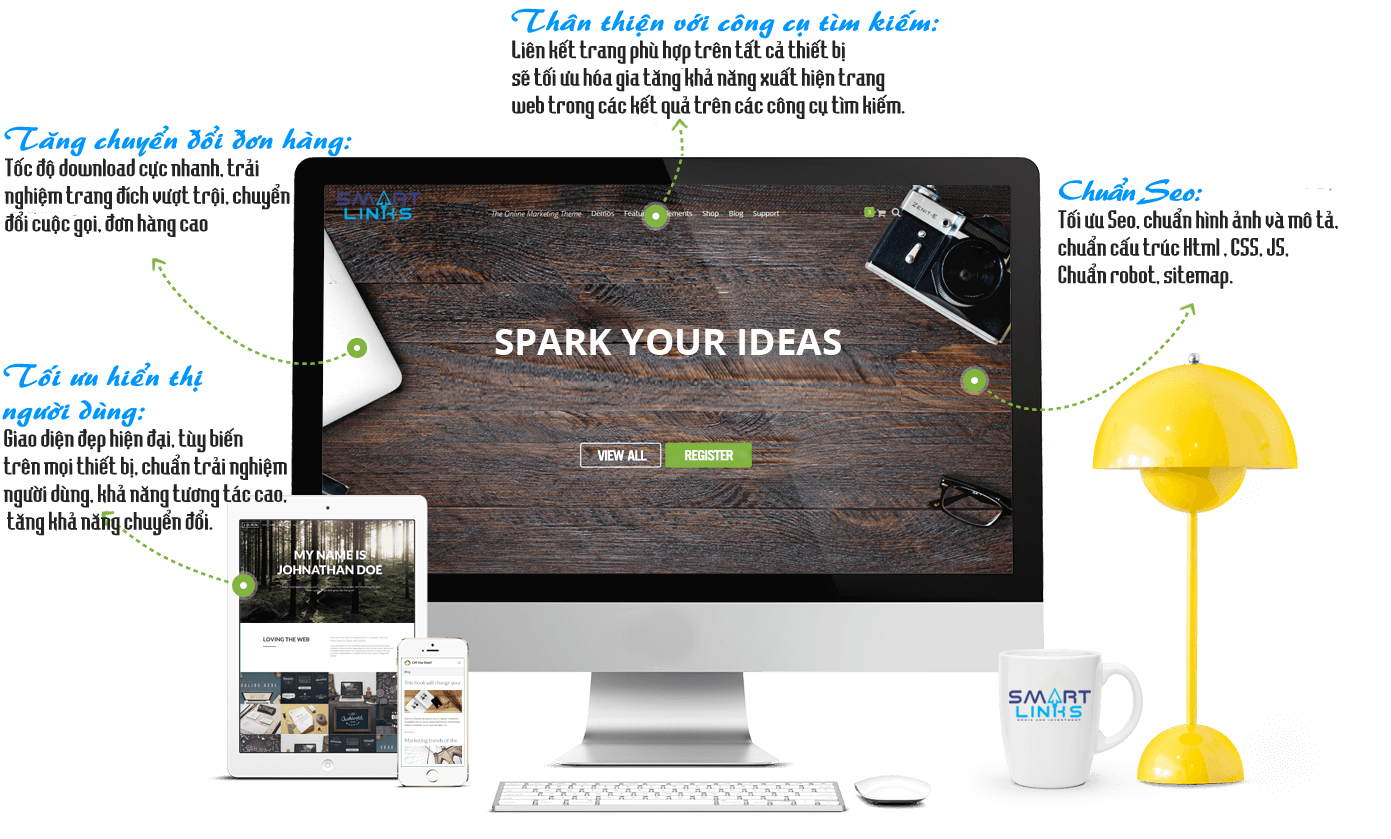
<style>
.page{position:relative;width:1391px;height:839px;background:#ffffff}
.page>*{position:absolute;margin:0}
.t1{font:23px "NVTBedrockNormal";color:#242423;scale:1.17 1}
.t2{font:28px "VNT-Brush";color:#0096ff;scale:1.17 1}
.t3{font:15px "UTM-Alter-Gothic";letter-spacing:-0.04em;color:#ffffff;scale:1.17 1}
</style>
<div class="page">
<p class="t1" style="left:511px;top:8px;width:428px;height:111px"><span class="t2">Thaân thieän vôùi coâng cuï tìm kieám:<br></span>Lieân keát trang phuø hôïp treân taát caû thieát bò<br>seõ toái öu hoùa gia taêng khaû naêng xuaát hieän trang<br>web trong caùc keát quaû treân caùc coâng cuï tìm kieám.</p>
<p class="t1" style="left:4px;top:125px;width:348px;height:112px"><span class="t2">Taêng chuyeån ñoåi ñôn haøng:<br></span>Toác ñoä download cöïc nhanh, traûi<br>nghieäm trang ñích vöôït troäi, chuyeån<br>ñoåi cuoäc goïi, ñôn haøng cao</p>
<p class="t1" style="left:2px;top:362px;width:285px;height:174px"><span class="t2">Toái öu hieån thò <br>ngöôøi duøng:<br></span>Giao dieän ñeïp hieän ñaïi, tuøy bieán <br>treân moïi thieát bò, chuaån traûi nghieäm <br>ngöôøi duøng, khaû naêng töông taùc cao,<br> taêng khaû naêng chuyeån ñoåi.</p>
<p class="t3" style="left:597px;top:450px;width:50px;height:11px">VIEW ALL</p>
<p class="t3" style="left:685px;top:450px;width:49px;height:11px">REGISTER</p>
</div>
